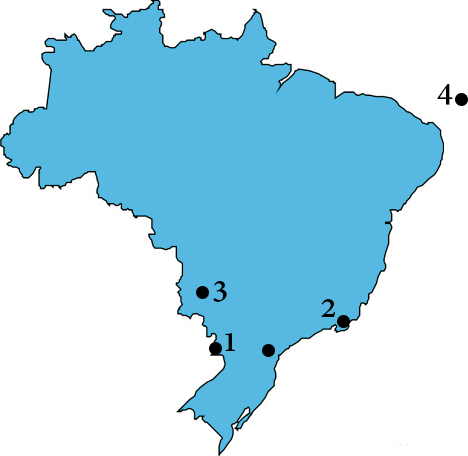
<style>
.page{position:relative;width:468px;height:456px;background:#ffffff}
.page>*{position:absolute;margin:0}
.t1{font:36px "AdobeGurmukhi-Bold";color:#000000}
</style>
<div class="page">
<p class="t1" style="left:437px;top:84px;width:16px;height:21px">4</p>
<p class="t1" style="left:213px;top:281px;width:14px;height:21px">3</p>
<p class="t1" style="left:321px;top:299px;width:15px;height:18px">2</p>
<p class="t1" style="left:225px;top:333px;width:10px;height:18px">1</p>
</div>
